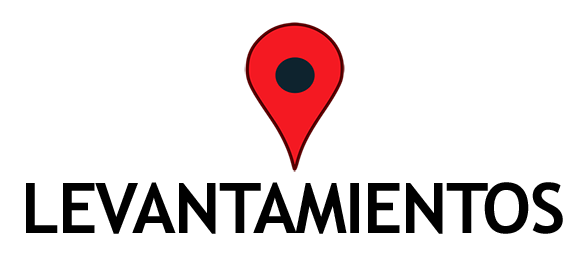
<style>
.page{position:relative;width:580px;height:271px;background:#ffffff}
.page>*{position:absolute;margin:0}
.t1{font:69.7px "TrebuchetMS-Bold";letter-spacing:-0.025em;color:#000000}
</style>
<div class="page">
<p class="t1" style="left:26px;top:182px;width:537px;height:52px">LEVANTAMIENTOS</p>
</div>
